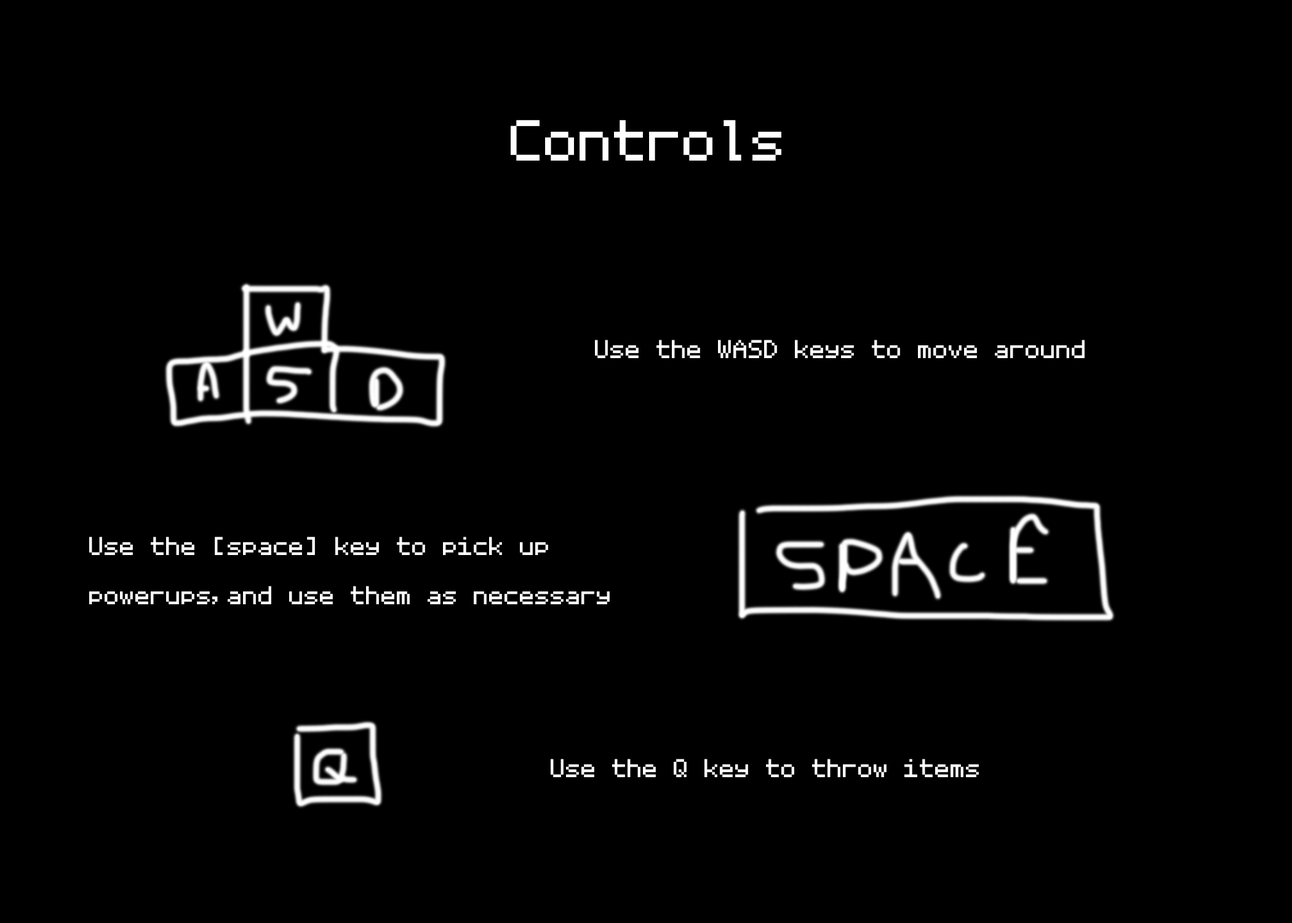
<style>
.page{position:relative;width:1292px;height:923px;background:#000000}
.page>*{position:absolute;margin:0}
.t1{font:92.3px "MozartNBP";color:#ffffff}
.t2{font:41px "MozartNBP";color:#ffffff}
</style>
<div class="page">
<p class="t1" style="left:511px;top:120px;width:270px;height:41px">Controls</p>
<p class="t2" style="left:595px;top:340px;width:490px;height:18px">Use the WASD keys to move around</p>
<p class="t2" style="left:89px;top:537px;width:521px;height:67px">Use the [space] key to pick up <br>powerups,and use them as necessary</p>
<p class="t2" style="left:551px;top:759px;width:428px;height:18px">Use the Q key to throw items</p>
</div>
